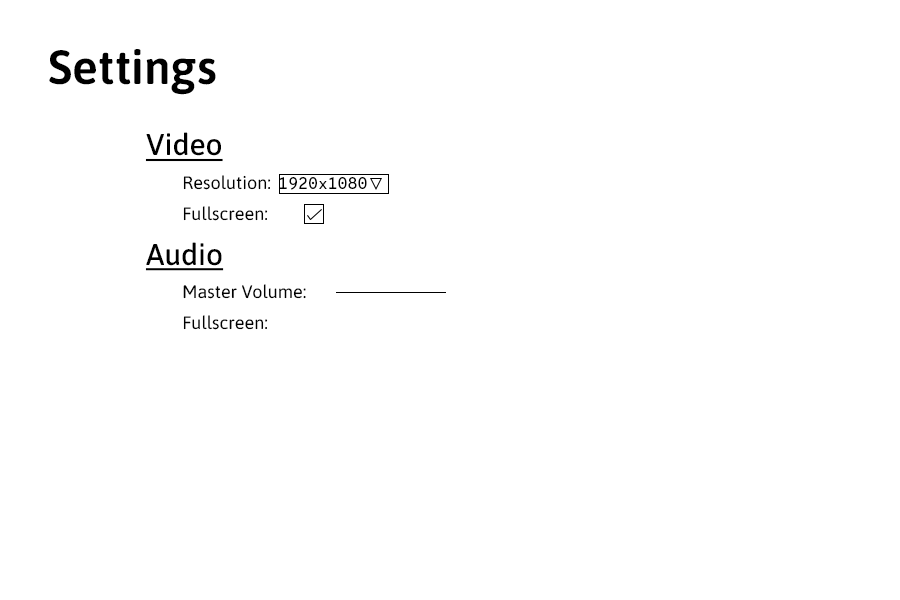
<style>
.page{position:relative;width:900px;height:600px;background:#ffffff}
.page>*{position:absolute;margin:0}
.t1{font:48px "Asap-SemiBold";color:#000000}
.t2{font:30px "Asap-Medium";color:#000000;text-decoration:underline}
.t3{font:18px "Asap-Regular";color:#000000}
.t4{font:16px "OverpassMono-Regular";color:#000000}
</style>
<div class="page">
<p class="t1" style="left:49px;top:49px;width:167px;height:46px">Settings</p>
<p class="t2" style="left:145px;top:132px;width:78px;height:30px">Video</p>
<p class="t3" style="left:183px;top:175px;width:88px;height:15px">Resolution:</p>
<p class="t4" style="left:279px;top:177px;width:88px;height:13px">1920x1080</p>
<p class="t3" style="left:183px;top:206px;width:85px;height:15px">Fullscreen:</p>
<p class="t2" style="left:145px;top:242px;width:79px;height:29px">Audio</p>
<p class="t3" style="left:183px;top:284px;width:123px;height:15px">Master Volume:</p>
<p class="t3" style="left:183px;top:315px;width:85px;height:15px">Fullscreen:</p>
</div>
